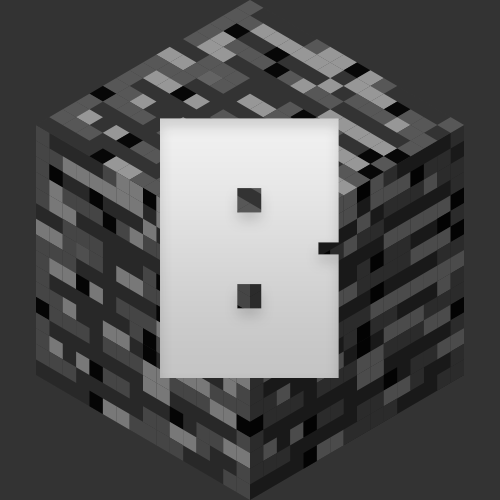
<style>
.page{position:relative;width:500px;height:500px;background:#333333}
.page>*{position:absolute;margin:0}
.t1{font:331.1px "Minecrafter";color:#d8d8d8;scale:0.9 1}
</style>
<div class="page">
<p class="t1" style="left:160px;top:118px;width:179px;height:260px">B</p>
</div>
